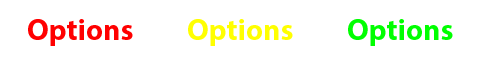
<style>
.page{position:relative;width:480px;height:60px;background:#ffffff}
.page>*{position:absolute;margin:0}
.t1{font:30px "MyriadPro-Bold";color:#ff0000}
.t2{font:30px "MyriadPro-Bold";color:#ffff00}
.t3{font:30px "MyriadPro-Bold";color:#00ff00}
</style>
<div class="page">
<p class="t1" style="left:28px;top:19px;width:105px;height:27px">Options</p>
<p class="t2" style="left:188px;top:19px;width:105px;height:27px">Options</p>
<p class="t3" style="left:348px;top:19px;width:105px;height:27px">Options</p>
</div>
